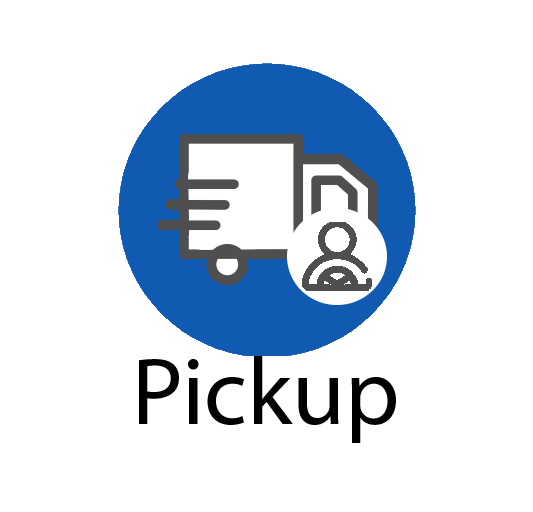
<style>
.page{position:relative;width:533px;height:512px;background:#ffffff}
.page>*{position:absolute;margin:0}
.t1{font:96px "MyriadPro-Regular";color:#000000}
</style>
<div class="page">
<p class="t1" style="left:139px;top:356px;width:257px;height:87px">Pickup</p>
</div>
